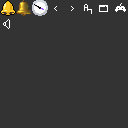
<style>
.page{position:relative;width:128px;height:128px;background:#333333}
.page>*{position:absolute;margin:0}
.t1{font:8px "Galmuri7-Regular";color:#ffffff}
</style>
<div class="page">
<p class="t1" style="left:84px;top:4px;width:4px;height:7px">A</p>
<p class="t1" style="left:87px;top:9px;width:5px;height:5px">ㄱ</p>
</div>
